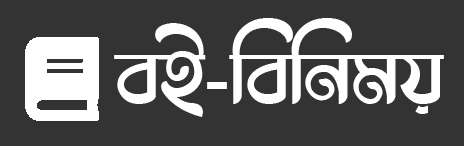
<style>
.page{position:relative;width:464px;height:146px;background:#333333}
.page>*{position:absolute;margin:0}
.t1{font:77.6px "LiShamimNoorANSIV2";color:#ffffff}
.t2{font:77.6px "TimesNewRomanPSMT";color:#ffffff}
</style>
<div class="page">
<p class="t1" style="left:114px;top:18px;width:330px;height:99px">eB<span class="t2">-</span>wewbgq</p>
</div>
